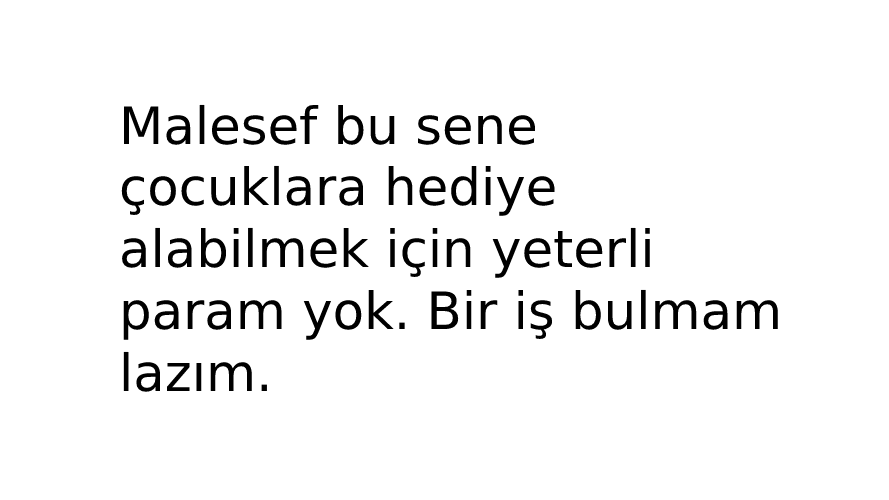
<style>
.page{position:relative;width:889px;height:500px;background:#ffffff}
.page>*{position:absolute;margin:0}
.t1{font:51.4px "DejaVuSans";color:#000000}
</style>
<div class="page">
<p class="t1" style="left:121px;top:104px;width:657px;height:288px">Malesef bu sene <br>çocuklara hediye<br>alabilmek için yeterli<br>param yok. Bir iş bulmam<br>lazım.</p>
</div>
